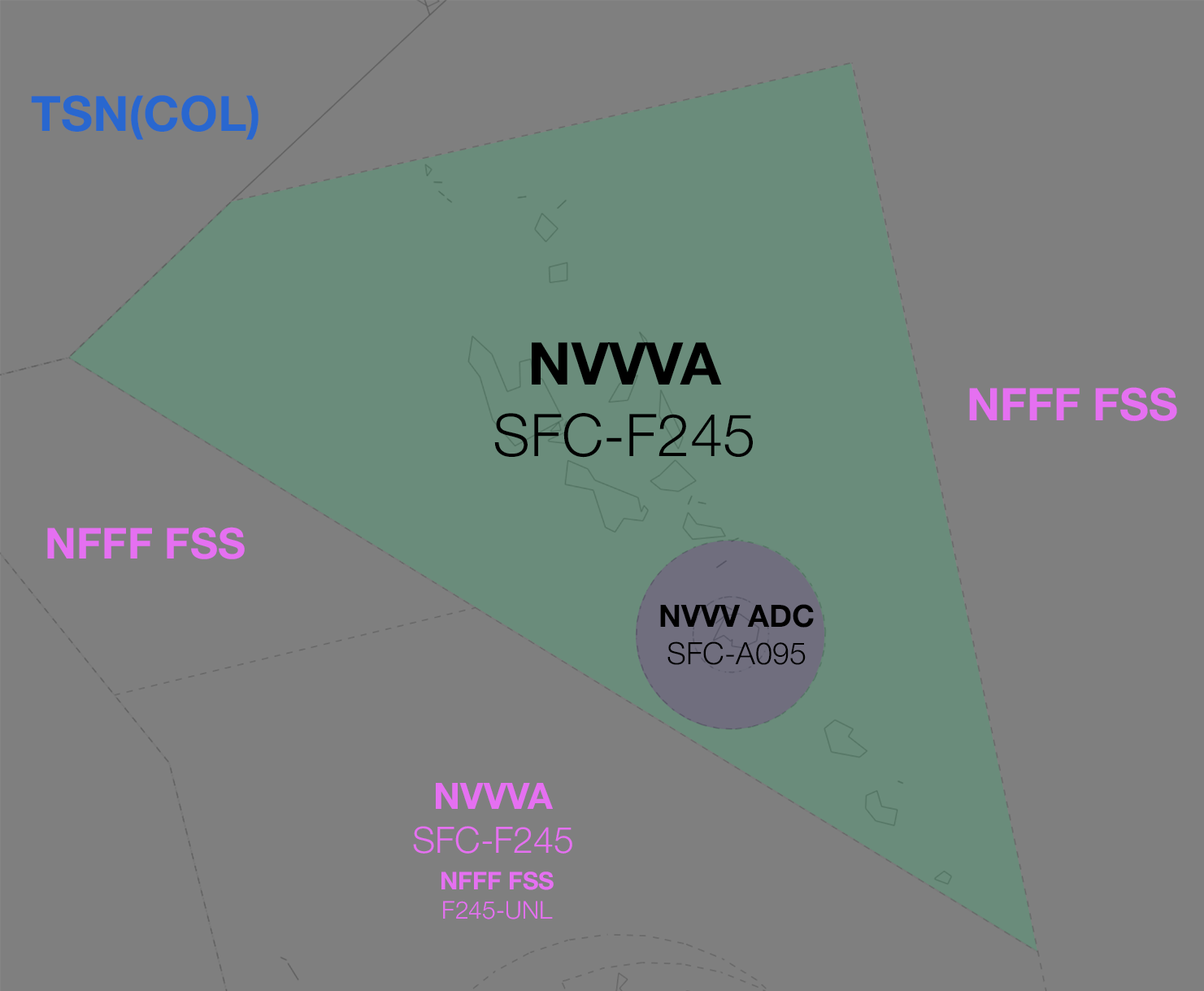
<style>
.page{position:relative;width:1204px;height:991px;background:#7f7f7f}
.page>*{position:absolute;margin:0}
.t1{font:48.9px "HelveticaNeue-Bold";color:#2967cf}
.t2{font:59.1px "HelveticaNeue-Light";color:#000000}
.t3{font:59.1px "HelveticaNeue-Bold";color:#000000}
.t4{font:45.1px "HelveticaNeue-Bold";color:#e570f1}
.t5{font:42.7px "HelveticaNeue-Bold";color:#e570f1}
.t6{font:30.7px "HelveticaNeue-Bold";color:#000000}
.t7{font:30.7px "HelveticaNeue-Light";color:#000000}
.t8{font:36.4px "HelveticaNeue-Light";color:#e570f1}
.t9{font:36.4px "HelveticaNeue-Bold";color:#e570f1}
.t10{font:24.5px "HelveticaNeue-Bold";color:#e570f1}
.t11{font:24.5px "HelveticaNeue-Light";color:#e570f1}
</style>
<div class="page">
<p class="t1" style="left:31px;top:95px;width:227px;height:45px">TSN(COL)</p>
<p class="t2" style="left:494px;top:342px;width:259px;height:116px;text-align:center"><span class="t3">NVVVA<br></span>SFC-F245</p>
<p class="t4" style="left:969px;top:387px;width:208px;height:34px">NFFF FSS</p>
<p class="t5" style="left:47px;top:527px;width:198px;height:32px">NFFF FSS</p>
<p class="t6" style="left:660px;top:604px;width:154px;height:61px;text-align:center">NVVV ADC<br><span class="t7">SFC-A095</span></p>
<p class="t8" style="left:413px;top:783px;width:159px;height:70px;text-align:center"><span class="t9">NVVVA<br></span>SFC-F245</p>
<p class="t10" style="left:441px;top:871px;width:112px;height:48px;text-align:center">NFFF FSS<br><span class="t11">F245-UNL</span></p>
</div>
